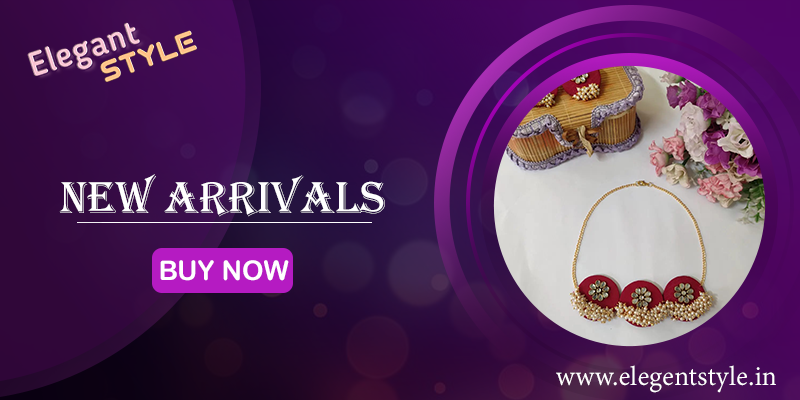
<style>
.page{position:relative;width:800px;height:400px}
.page>*{position:absolute;margin:0}
.t1{font:46.1px "Algerian";color:#ffffff}
.t2{font:27.1px "ArialRoundedMTBold";color:#ffffff}
.t3{font:30px "AdobeDevanagari-Regular";color:#ffffff}
</style>
<div class="page">
<p class="t1" style="left:59px;top:174px;width:326px;height:43px">New Arrivals</p>
<p class="t2" style="left:160px;top:260px;width:129px;height:21px">BUY NOW</p>
<p class="t3" style="left:556px;top:365px;width:220px;height:28px">www.elegentstyle.in</p>
</div>
